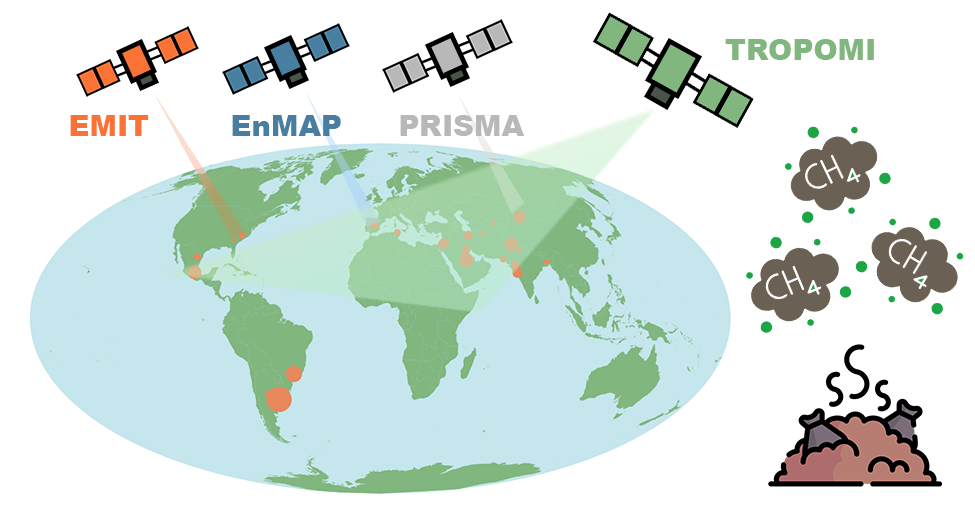
<style>
.page{position:relative;width:975px;height:525px;background:#ffffff}
.page>*{position:absolute;margin:0}
.t1{font:29px "Arial-Black";color:#81b67f}
.t2{font:29px "Arial-Black";color:#fa7236;text-transform:uppercase}
.t3{font:29px "Arial-Black";color:#487fa1}
.t4{font:29px "Arial-Black";color:#b8b8b8}
</style>
<div class="page">
<p class="t1" style="left:725px;top:39px;width:149px;height:21px">TROPOMI</p>
<p class="t2" style="left:70px;top:115px;width:79px;height:21px">EMIT</p>
<p class="t3" style="left:232px;top:115px;width:109px;height:21px">EnMAP</p>
<p class="t4" style="left:400px;top:115px;width:124px;height:21px">PRISMA</p>
</div>
